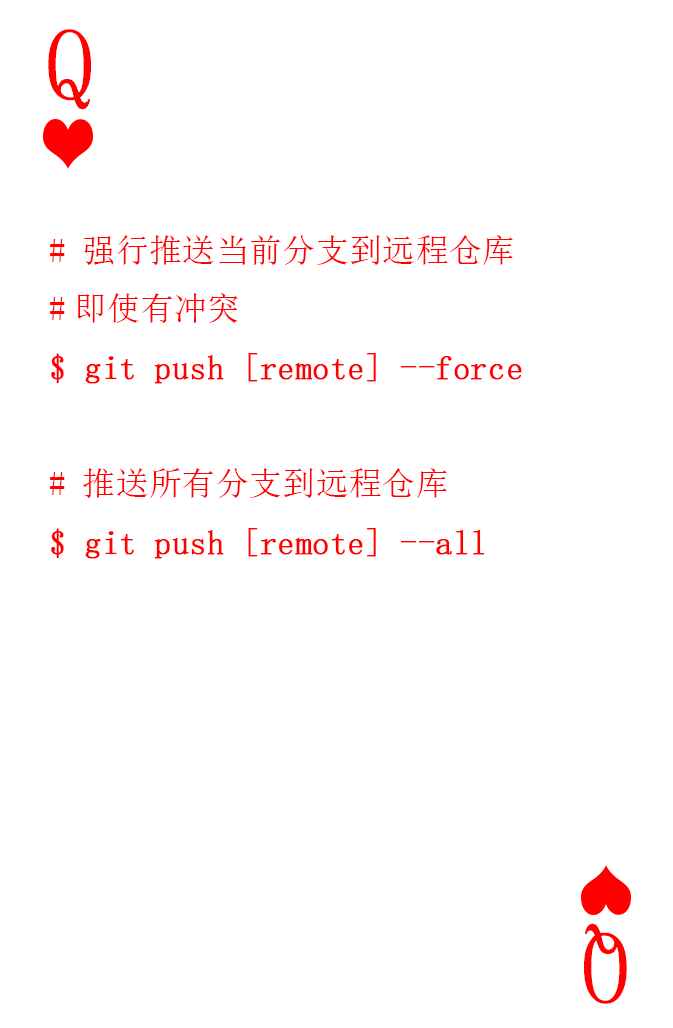
<style>
.page{position:relative;width:673px;height:1028px;background:#ffffff}
.page>*{position:absolute;margin:0}
.t1{font:104.2px "SimSun-ExtB";color:#ff0101;scale:0.93 1}
.t2{font:33.3px "SimSun";color:#ff0000;font-weight:bold}
.t3{font:33.3px "SimSun";color:#ff0000}
.t4{font:104.2px "SimSun-ExtB";letter-spacing:-0.14em;color:#ff0101;scale:0.93 1}
</style>
<div class="page">
<p class="t1" style="left:48px;top:29px;width:43px;height:81px">Q</p>
<p class="t2" style="left:50px;top:235px;width:472px;height:324px"><span class="t3"># 强行推送当前分支到远程仓库<br>#即使有冲突<br></span>$ git push [remote] --force<br><span class="t3"><br># 推送所有分支到远程仓库<br></span>$ git push [remote] --all</p>
<p class="t4" style="left:584px;top:923px;width:43px;height:81px;rotate:180deg">Q</p>
</div>
